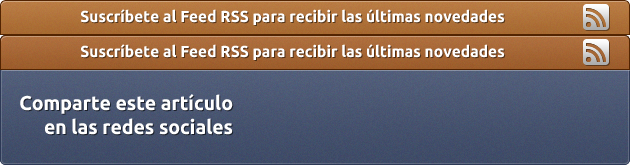
<style>
.page{position:relative;width:630px;height:165px}
.page>*{position:absolute;margin:0}
.t1{font:16px "Ubuntu-Bold";color:#ffffff;scale:0.97 1}
.t2{font:20px "Ubuntu-Bold";color:#ffffff;scale:0.97 1}
</style>
<div class="page">
<p class="t1" style="left:80px;top:9px;width:425px;height:16px">Suscríbete al Feed RSS para recibir las últimas novedades</p>
<p class="t1" style="left:80px;top:44px;width:425px;height:16px">Suscríbete al Feed RSS para recibir las últimas novedades</p>
<p class="t2" style="left:20px;top:94px;width:213px;height:41px;text-align:right">Comparte este artículo en las redes sociales</p>
</div>
